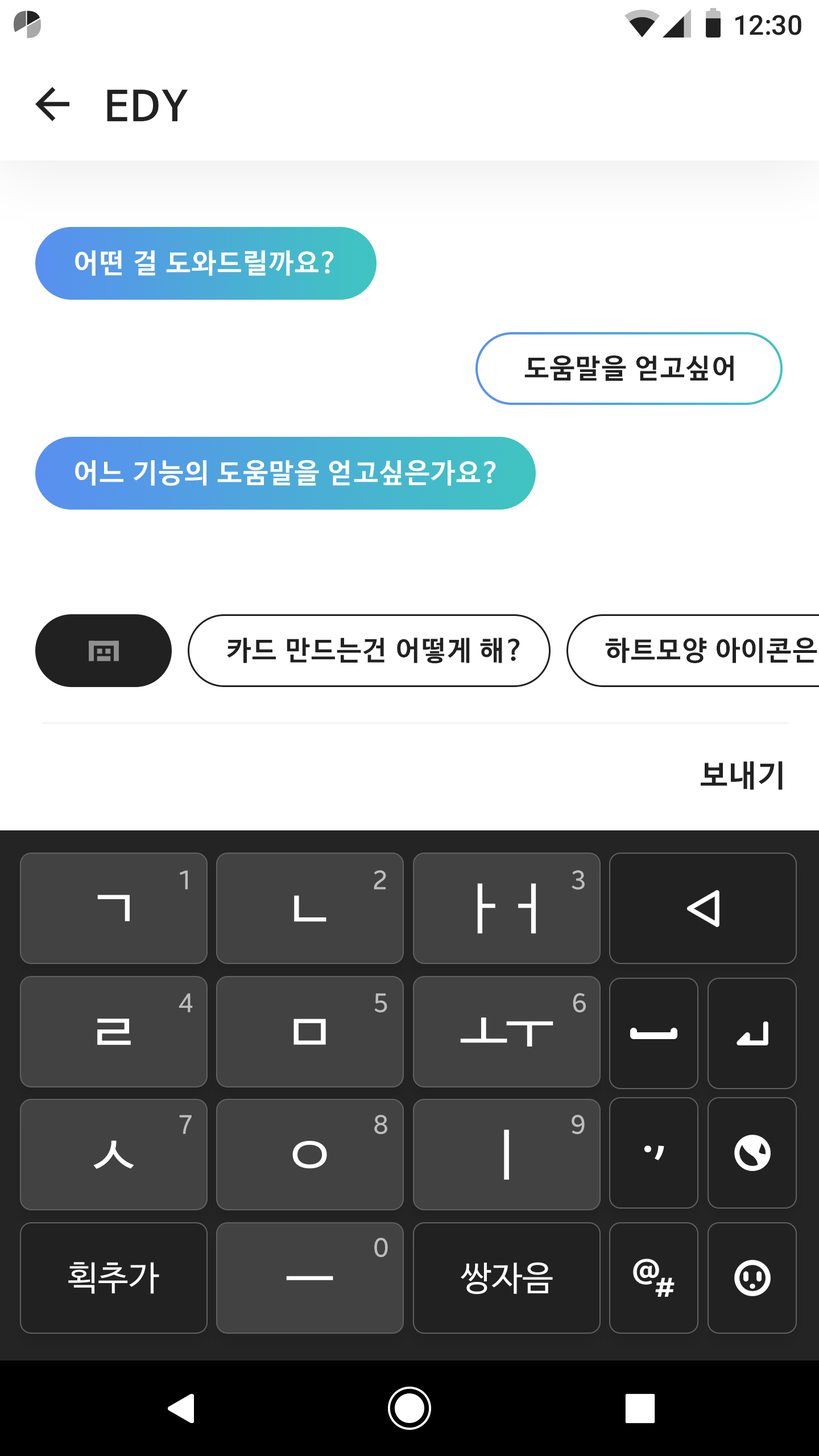
<style>
.page{position:relative;width:819px;height:1456px;background:#ffffff}
.page>*{position:absolute;margin:0}
.t1{font:27.3px "Roboto-Medium";color:#212121}
.t2{font:40.9px "NanumBarunGothicBold";letter-spacing:0.05em;color:#212121}
.t3{font:27.3px "NanumBarunGothicBold";letter-spacing:0.05em;color:#ffffff}
.t4{font:27.3px "NanumBarunGothicBold";letter-spacing:0.05em;color:#212121}
.t5{font:30.7px "NanumBarunGothicBold";letter-spacing:0.05em;color:#212121}
</style>
<div class="page">
<p class="t1" style="left:735px;top:15px;width:66px;height:20px">12:30</p>
<p class="t2" style="left:107px;top:89px;width:81px;height:33px">EDY</p>
<p class="t3" style="left:75px;top:250px;width:259px;height:26px">어떤 걸 도와드릴까요?</p>
<p class="t4" style="left:524px;top:355px;width:210px;height:26px">도움말을 얻고싶어</p>
<p class="t3" style="left:75px;top:460px;width:421px;height:26px">어느 기능의 도움말을 얻고싶은가요?</p>
<p class="t4" style="left:227px;top:638px;width:293px;height:26px">카드 만드는건 어떻게 해?</p>
<p class="t5" style="left:701px;top:761px;width:82px;height:29px">보내기</p>
</div>
